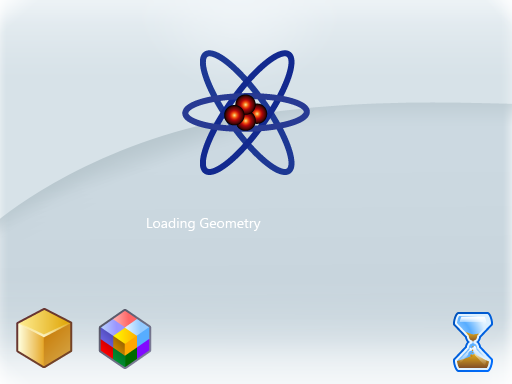
<style>
.page{position:relative;width:512px;height:384px}
.page>*{position:absolute;margin:0}
.t1{font:14px "SegoeUI";color:#ffffff}
</style>
<div class="page">
<p class="t1" style="left:147px;top:218px;width:114px;height:13px">Loading Geometry</p>
</div>
